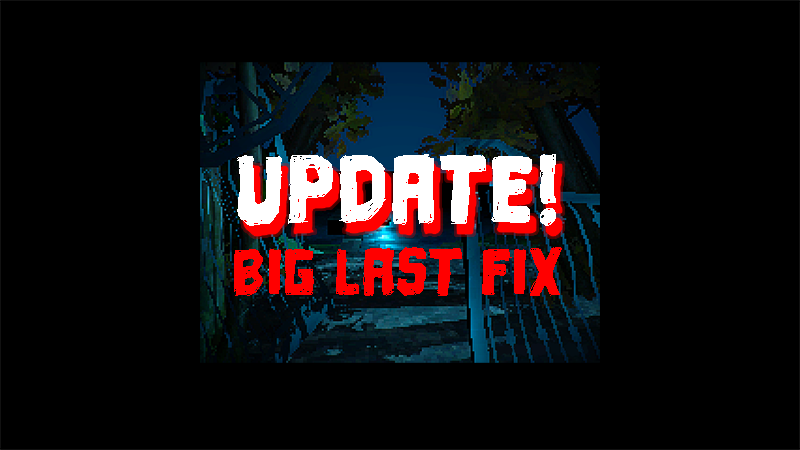
<style>
.page{position:relative;width:800px;height:450px;background:#000000}
.page>*{position:absolute;margin:0}
.t1{font:99.4px "DrivingAround-Regular";color:#ffffff}
.t2{font:68.1px "DrivingAround-Regular";color:#ff0000}
</style>
<div class="page">
<p class="t1" style="left:237px;top:154px;width:319px;height:72px">UPDATE!</p>
<p class="t2" style="left:234px;top:247px;width:328px;height:49px">big last fix</p>
</div>
